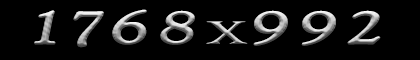
<style>
.page{position:relative;width:420px;height:60px;background:#000000}
.page>*{position:absolute;margin:0}
.t1{font:48px "GoudyOldStyleT-Italic";letter-spacing:0.075em;font-variant:small-caps;font-weight:bold;scale:1.67 1}
.t2{font:36px "RingbearerMedium";letter-spacing:0.075em;scale:1.67 1}
</style>
<div class="page">
<p class="t1" style="left:34px;top:9px;width:347px;height:39px">1768<span class="t2">x</span>992</p>
<p class="t1" style="left:34px;top:9px;width:347px;height:39px">1768<span class="t2">x</span>992</p>
</div>
